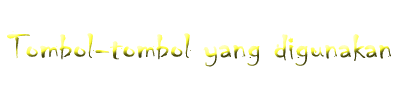
<style>
.page{position:relative;width:400px;height:100px;background:#ffffff}
.page>*{position:absolute;margin:0}
.t1{font:36.7px "Chiller-Regular";scale:1.18 1}
</style>
<div class="page">
<p class="t1" style="left:7px;top:31px;width:384px;height:36px">Tombol-tombol yang digunakan</p>
</div>
